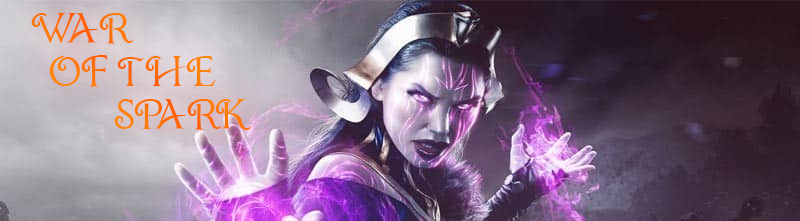
<style>
.page{position:relative;width:800px;height:221px}
.page>*{position:absolute;margin:0}
.t1{font:36px "ChocolateBox";color:#ff7508}
</style>
<div class="page">
<p class="t1" style="left:31px;top:13px;width:220px;height:117px">WAR<br>  OF THE<br>         SPARK</p>
</div>
